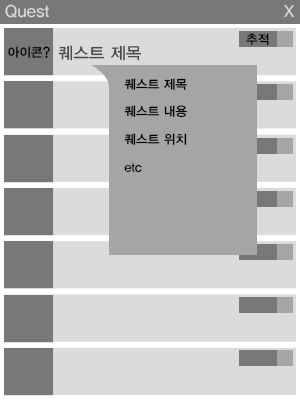
<style>
.page{position:relative;width:300px;height:400px;background:#dbdbdb}
.page>*{position:absolute;margin:0}
.t1{font:12px "YDIYGO330";letter-spacing:0.01em;color:#dbdbdb}
.t2{font:12.5px "YDIYGO330";letter-spacing:0.01em;color:#010101}
.t3{font:12.5px "YDIYGO330";letter-spacing:0.01em;color:#000000}
.t4{font:12px "YDIYGO330";letter-spacing:0.01em;color:#4b4b4b}
.t5{font:12.5px/27.8px "YDIYGO330";letter-spacing:0.01em;color:#000000}
</style>
<div class="page">
<p class="t1" style="left:5px;top:4px;width:44px;height:14px">Quest</p>
<p class="t1" style="left:284px;top:4px;width:11px;height:14px">X</p>
<p class="t2" style="left:246px;top:33px;width:23px;height:12px">추적</p>
<p class="t3" style="left:8px;top:46px;width:42px;height:12px">아이콘?</p>
<p class="t4" style="left:58px;top:45px;width:84px;height:16px">퀘스트 제목</p>
<p class="t5" style="left:124px;top:78px;width:63px;height:95px">퀘스트 제목<br>퀘스트 내용<br>퀘스트 위치<br>etc</p>
</div>
